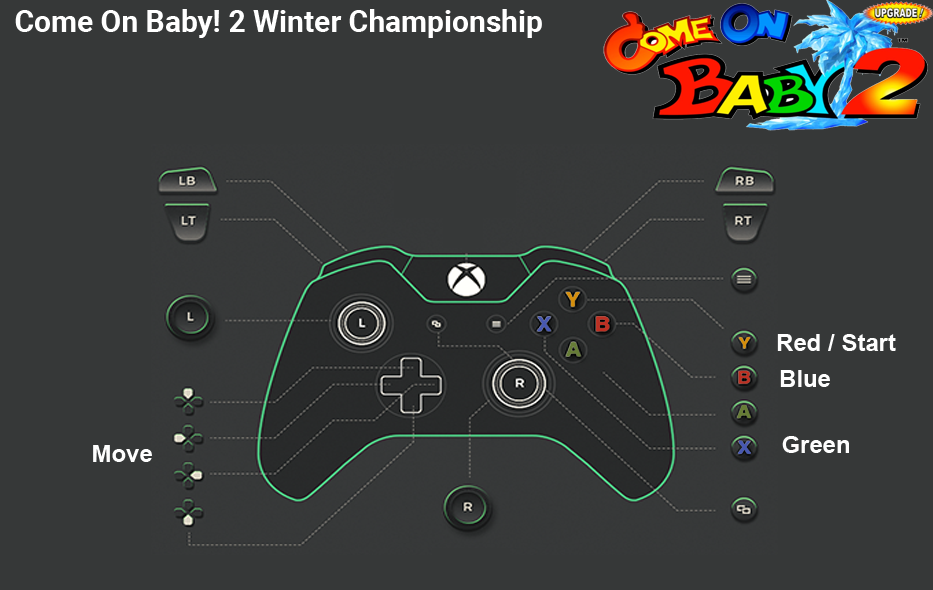
<style>
.page{position:relative;width:933px;height:590px;background:#363838}
.page>*{position:absolute;margin:0}
.t1{font:30px "Roboto-Bold";color:#ffffff}
.t2{font:24px "Arial-BoldMT";color:#fefefe}
</style>
<div class="page">
<p class="t1" style="left:15px;top:9px;width:527px;height:29px">Come On Baby! 2 Winter Championship</p>
<p class="t2" style="left:777px;top:334px;width:119px;height:17px">Red / Start</p>
<p class="t2" style="left:780px;top:370px;width:50px;height:17px">Blue</p>
<p class="t2" style="left:782px;top:436px;width:67px;height:17px">Green</p>
<p class="t2" style="left:93px;top:445px;width:59px;height:17px">Move</p>
</div>
